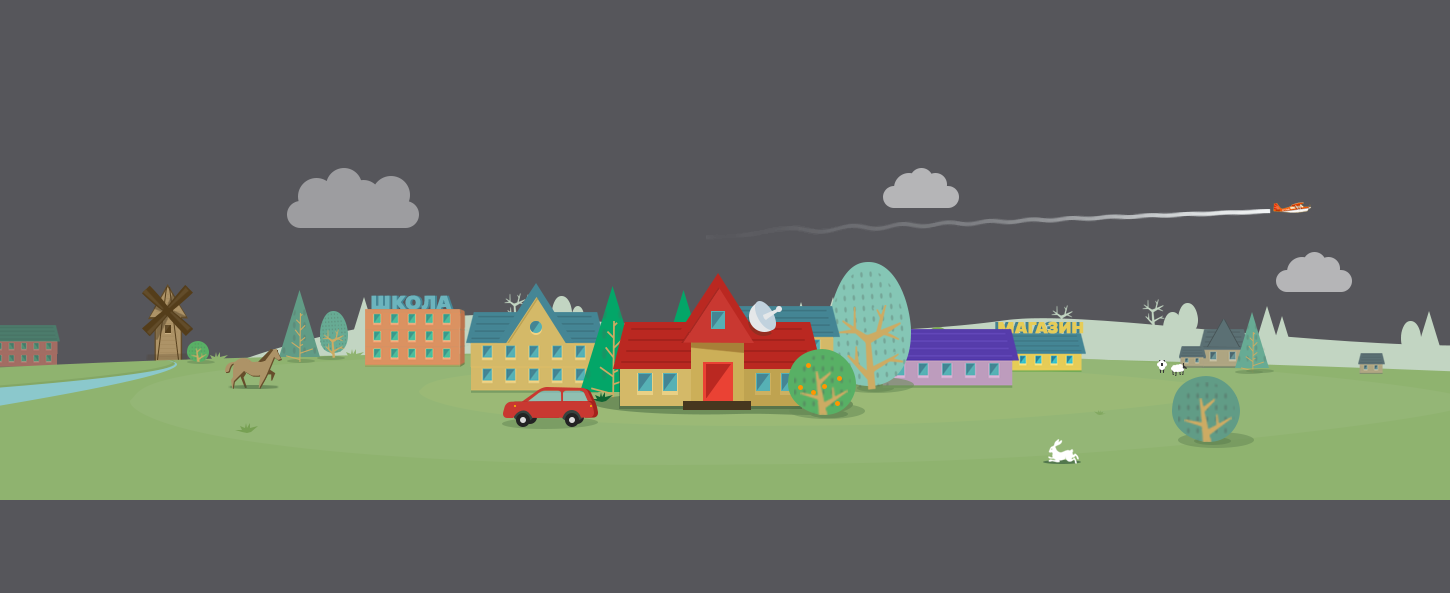
<style>
.page{position:relative;width:1450px;height:593px;background:#56565b}
.page>*{position:absolute;margin:0}
.t1{font:20.3px "OsnovaPro-Heavy";letter-spacing:-0.025em;color:#6cb4bd;font-weight:bold}
.t2{font:20.3px "OsnovaPro-Heavy";letter-spacing:-0.025em;font-weight:bold}
.t3{font:17px "OsnovaPro-Heavy";letter-spacing:-0.025em;color:#e6cc57;font-weight:bold}
</style>
<div class="page">
<p class="t1" style="left:371px;top:295px;width:81px;height:15px">ШКОЛА</p>
<p class="t2" style="left:373px;top:295px;width:81px;height:15px">ШКОЛА</p>
<p class="t3" style="left:998px;top:321px;width:86px;height:13px">МАГАЗИН</p>
</div>
